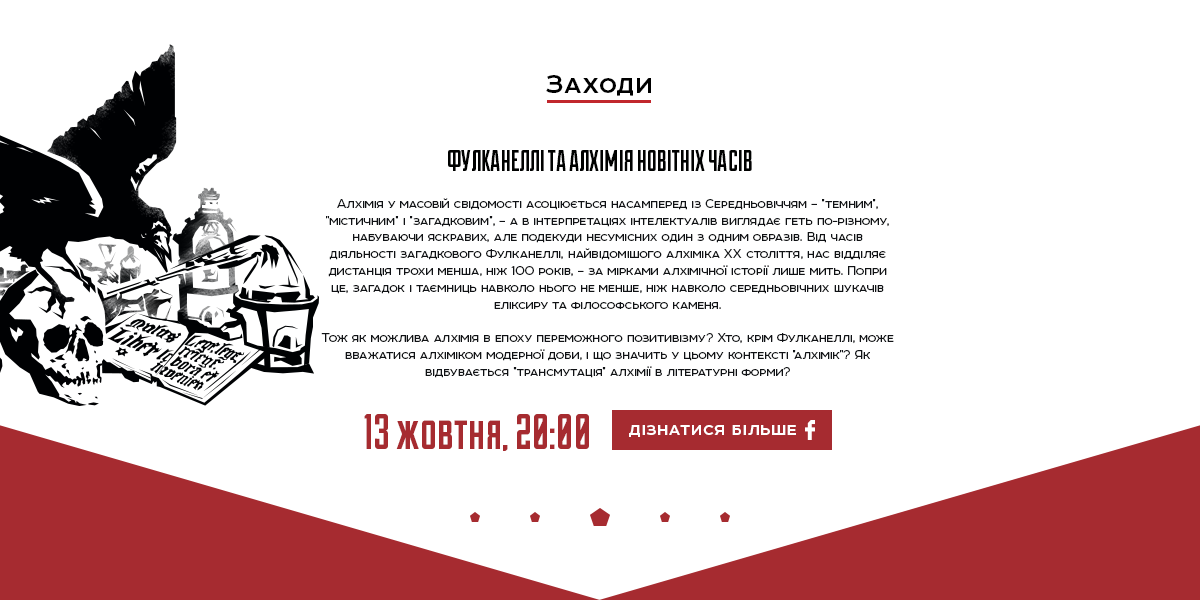
<style>
.page{position:relative;width:1200px;height:600px;background:#ffffff}
.page>*{position:absolute;margin:0}
.t1{font:30px "Room-Bold";letter-spacing:0.03em;color:#000000}
.t2{font:30px "AADuke-Fill";color:#000100}
.t3{font:14px "Room";color:#000000}
.t4{font:50px "AADuke-Fill";letter-spacing:0.01em;color:#a62b30}
.t5{font:20px "Room-Bold";letter-spacing:0.03em;color:#ffffff}
</style>
<div class="page">
<p class="t1" style="left:546px;top:75px;width:105px;height:21px">Заходи</p>
<p class="t2" style="left:448px;top:150px;width:304px;height:21px">ФУЛКАНЕЛЛІ ТА АЛХІМІЯ НОВІТНІХ ЧАСІВ</p>
<p class="t3" style="left:321px;top:198px;width:573px;height:180px;text-align:center">Алхімія у масовій свідомості асоціюється насамперед із Середньовіччям – "темним", "містичним" і "загадковим", – а в інтерпретаціях інтелектуалів виглядає геть по-різному, набуваючи яскравих, але подекуди несумісних один з одним образів. Від часів діяльності загадкового Фулканеллі, найвідомішого алхіміка XX століття, нас відділяє дистанція трохи менша, ніж 100 років, – за мірками алхімічної історії лише мить. Попри це, загадок і таємниць навколо нього не менше, ніж навколо середньовічних шукачів еліксиру та філософського каменя.<br><br>Тож як можлива алхімія в епоху переможного позитивізму? Хто, крім Фулканеллі, може вважатися алхіміком модерної доби, і що значить у цьому контексті "алхімік"? Як відбувається "трансмутація" алхімії в літературні форми?</p>
<p class="t4" style="left:364px;top:414px;width:225px;height:37px">13 жовтня, 20:00</p>
<p class="t5" style="left:629px;top:425px;width:167px;height:12px">дізнатися більше</p>
</div>
